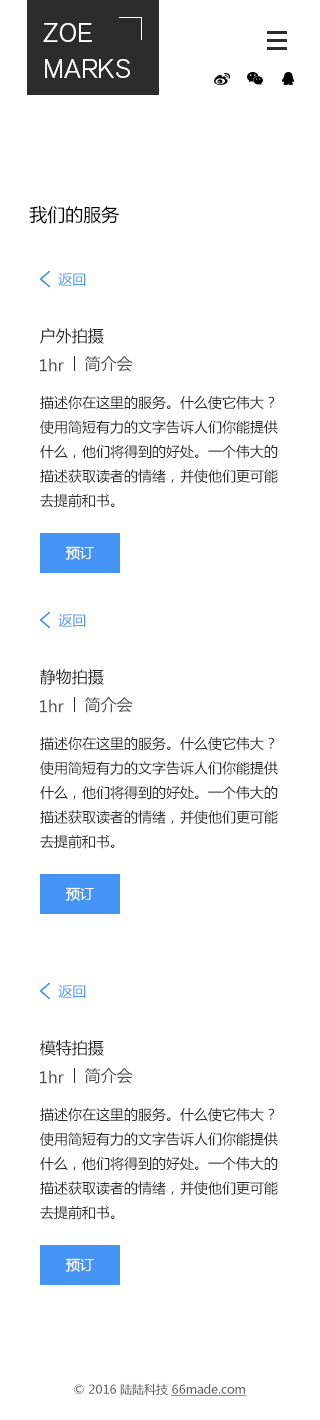
<style>
.page{position:relative;width:320px;height:1420px;background:#ffffff}
.page>*{position:absolute;margin:0}
.t1{font:26px/36px "AkzidenzGroteskBQ-LightSC";color:#ffffff}
.t2{font:18px "MicrosoftYaHei";color:#000000}
.t3{font:14px "MicrosoftYaHei";color:#4d99f7}
.t4{font:16px "MicrosoftYaHei";color:#2c2c2b}
.t5{font:16px "MicrosoftYaHei";color:#544d4d}
.t6{font:14px "MicrosoftYaHei";color:#2c2c2b}
.t7{font:14px "MicrosoftYaHei";color:#ffffff}
.t8{font:12px "MicrosoftYaHei";color:#5e5d5d}
</style>
<div class="page">
<p class="t1" style="left:43px;top:23px;width:87px;height:55px">ZOE<br>MARKS</p>
<p class="t2" style="left:29px;top:206px;width:91px;height:18px">我们的服务</p>
<p class="t3" style="left:58px;top:272px;width:28px;height:14px">返回</p>
<p class="t4" style="left:40px;top:328px;width:64px;height:16px">户外拍摄</p>
<p class="t5" style="left:40px;top:358px;width:24px;height:14px">1hr</p>
<p class="t5" style="left:84px;top:356px;width:49px;height:16px">简介会</p>
<p class="t6" style="left:40px;top:395px;width:238px;height:113px">描述你在这里的服务。什么使它伟大？使用简短有力的文字告诉人们你能提供什么，他们将得到的好处。一个伟大的描述获取读者的情绪，并使他们更可能去提前和书。</p>
<p class="t7" style="left:65px;top:546px;width:29px;height:14px">预订</p>
<p class="t3" style="left:58px;top:613px;width:28px;height:14px">返回</p>
<p class="t4" style="left:40px;top:669px;width:64px;height:16px">静物拍摄</p>
<p class="t5" style="left:40px;top:699px;width:24px;height:14px">1hr</p>
<p class="t5" style="left:84px;top:697px;width:49px;height:16px">简介会</p>
<p class="t6" style="left:40px;top:736px;width:238px;height:113px">描述你在这里的服务。什么使它伟大？使用简短有力的文字告诉人们你能提供什么，他们将得到的好处。一个伟大的描述获取读者的情绪，并使他们更可能去提前和书。</p>
<p class="t7" style="left:65px;top:887px;width:29px;height:14px">预订</p>
<p class="t3" style="left:58px;top:984px;width:28px;height:14px">返回</p>
<p class="t4" style="left:40px;top:1040px;width:64px;height:16px">模特拍摄</p>
<p class="t5" style="left:40px;top:1070px;width:24px;height:14px">1hr</p>
<p class="t5" style="left:84px;top:1068px;width:49px;height:16px">简介会</p>
<p class="t6" style="left:40px;top:1107px;width:238px;height:113px">描述你在这里的服务。什么使它伟大？使用简短有力的文字告诉人们你能提供什么，他们将得到的好处。一个伟大的描述获取读者的情绪，并使他们更可能去提前和书。</p>
<p class="t7" style="left:65px;top:1258px;width:29px;height:14px">预订</p>
<p class="t8" style="left:74px;top:1383px;width:171px;height:13px">© 2016 陆陆科技 66made.com</p>
</div>
